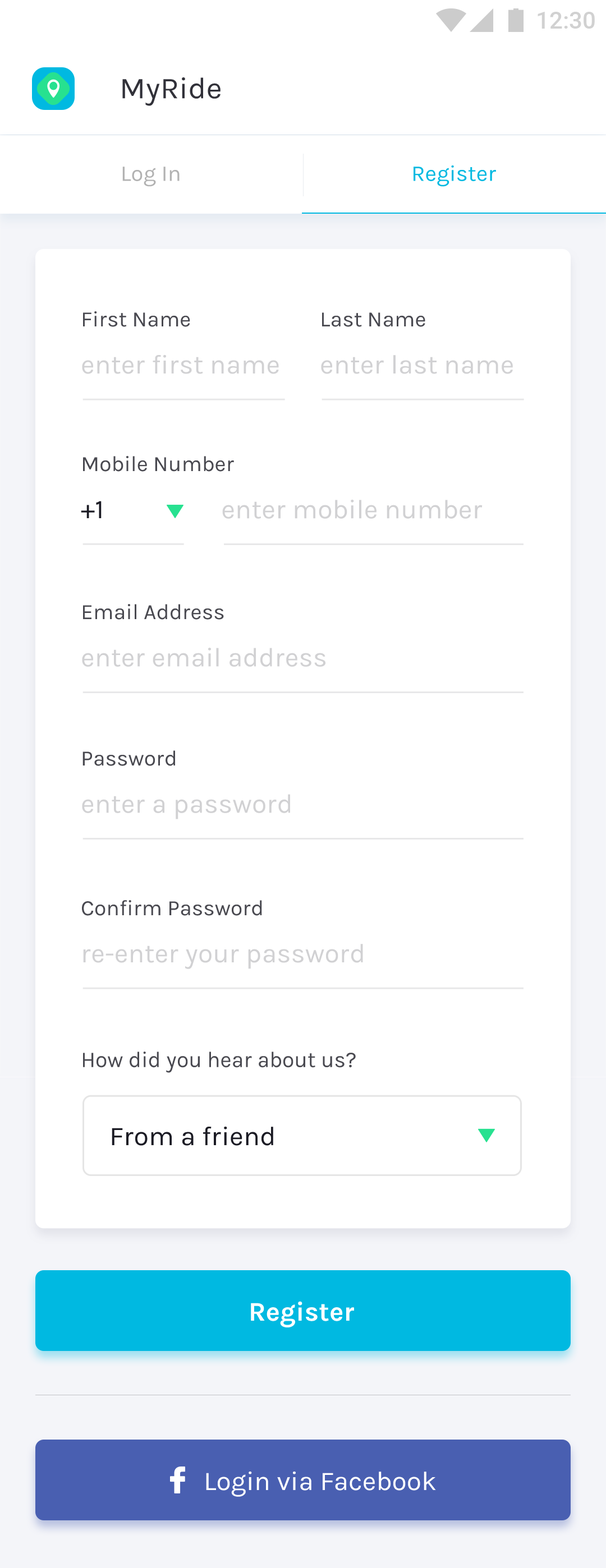
<style>
.page{position:relative;width:606px;height:1568px;background:#ffffff}
.page>*{position:absolute;margin:0}
.t1{font:30.3px "Karla-Regular";color:#1b1b24}
.t2{font:22.4px "Karla-Regular";color:#b2b2b2}
.t3{font:22.4px "Karla-Regular";color:#00b9e1}
.t4{font:21.9px "Karla-Regular";color:#494950}
.t5{font:26.9px "Karla-Regular";color:#d1d1d3}
.t6{font:26.9px "Karla-Regular";color:#1b1b24}
.t7{font:27.1px "Karla-Regular";color:#d1d1d3}
.t8{font:27px "Karla-Regular";color:#d1d1d3}
.t9{font:22.4px "Karla-Regular";color:#494950}
.t10{font:27px "Karla-Regular";color:#1b1b24}
.t11{font:26.9px "Karla-Bold";color:#ffffff}
.t12{font:26.9px "Karla-Regular";color:#ffffff}
</style>
<div class="page">
<p class="t1" style="left:122px;top:77px;width:98px;height:29px;opacity:0.9">MyRide</p>
<p class="t2" style="left:122px;top:167px;width:57px;height:20px">Log In</p>
<p class="t3" style="left:413px;top:165px;width:83px;height:22px">Register</p>
<p class="t4" style="left:83px;top:311px;width:107px;height:16px">First Name</p>
<p class="t4" style="left:322px;top:312px;width:103px;height:15px">Last Name</p>
<p class="t5" style="left:82px;top:355px;width:197px;height:19px">enter first name</p>
<p class="t5" style="left:321px;top:355px;width:192px;height:19px">enter last name</p>
<p class="t4" style="left:83px;top:456px;width:151px;height:16px">Mobile Number</p>
<p class="t6" style="left:81px;top:501px;width:21px;height:17px">+1</p>
<p class="t7" style="left:222px;top:500px;width:260px;height:19px">enter mobile number</p>
<p class="t4" style="left:83px;top:604px;width:141px;height:16px">Email Address</p>
<p class="t8" style="left:82px;top:648px;width:243px;height:19px">enter email address</p>
<p class="t4" style="left:82px;top:750px;width:93px;height:16px">Password</p>
<p class="t8" style="left:82px;top:794px;width:208px;height:25px">enter a password</p>
<p class="t4" style="left:82px;top:900px;width:180px;height:16px">Confirm Password</p>
<p class="t5" style="left:83px;top:944px;width:280px;height:25px">re-enter your password</p>
<p class="t9" style="left:83px;top:1052px;width:273px;height:21px">How did you hear about us?</p>
<p class="t10" style="left:112px;top:1127px;width:161px;height:19px">From a friend</p>
<p class="t11" style="left:251px;top:1301px;width:103px;height:26px">Register</p>
<p class="t12" style="left:206px;top:1472px;width:230px;height:25px">Login via Facebook</p>
</div>
